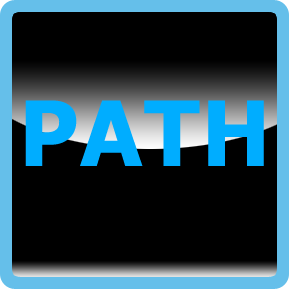
<style>
.page{position:relative;width:289px;height:289px;background:#000000}
.page>*{position:absolute;margin:0}
.t1{font:90px "Tahoma-Bold";letter-spacing:0.025em;color:#00adff}
</style>
<div class="page">
<p class="t1" style="left:25px;top:100px;width:239px;height:66px">PATH</p>
</div>
